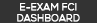
<style>
.page{position:relative;width:97px;height:23px;background:#333333}
.page>*{position:absolute;margin:0}
.t1{font:9.3px "NexaDemo-Light";color:#ffffff;font-weight:bold}
</style>
<div class="page">
<p class="t1" style="left:17px;top:3px;width:63px;height:19px;text-align:center">E-EXAM FCI<br>DASHBOARD</p>
</div>
